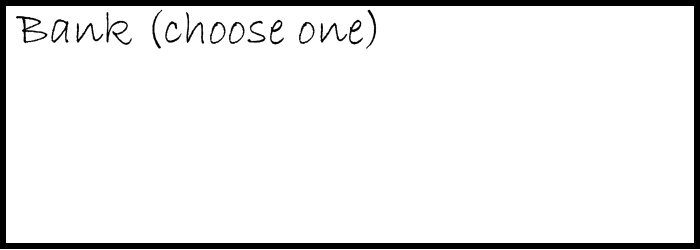
<style>
.page{position:relative;width:700px;height:250px;background:#ffffff}
.page>*{position:absolute;margin:0}
.t1{font:48px "BradleyHandITC";color:#000000}
</style>
<div class="page">
<p class="t1" style="left:16px;top:9px;width:361px;height:40px">Bank (choose one)</p>
</div>
